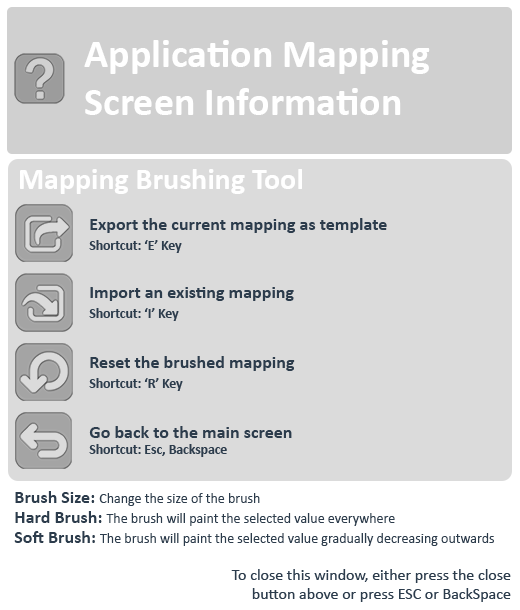
<style>
.page{position:relative;width:520px;height:610px;background:#dbdbdb}
.page>*{position:absolute;margin:0}
.t1{font:40px "Calibri-Bold";color:#ffffff}
.t2{font:30px "Calibri-Bold";color:#ffffff}
.t3{font:18px/20.4px "Calibri-Bold";color:#2c3c4c}
.t4{font:13.6px/20.4px "Calibri-Bold";color:#2c3c4c}
.t5{font:18px "Calibri-Bold";color:#2c3c4c}
.t6{font:13.6px "Calibri-Bold";color:#2c3c4c}
.t7{font:14px "Calibri";color:#2c3c4c}
.t8{font:16px "Calibri";color:#2c3c4c}
</style>
<div class="page">
<p class="t1" style="left:84px;top:40px;width:346px;height:75px">Application Mapping <br>Screen Information</p>
<p class="t2" style="left:20px;top:169px;width:282px;height:25px">Mapping Brushing Tool</p>
<p class="t3" style="left:89px;top:218px;width:298px;height:35px">Export the current mapping as template<br><span class="t4">Shortcut: ‘E’ Key</span></p>
<p class="t3" style="left:89px;top:287px;width:205px;height:34px">Import an existing mapping<br><span class="t4">Shortcut: ‘I’ Key</span></p>
<p class="t3" style="left:89px;top:356px;width:206px;height:35px">Reset the brushed mapping<br><span class="t4">Shortcut: ‘R’ Key</span></p>
<p class="t5" style="left:89px;top:426px;width:203px;height:31px">Go back to the main screen<br><span class="t6">Shortcut: Esc, Backspace</span></p>
<p class="t7" style="left:15px;top:491px;width:245px;height:15px"><span class="t5">Brush Size: </span>Change the size of the brush</p>
<p class="t7" style="left:15px;top:511px;width:380px;height:15px"><span class="t5">Hard Brush: </span>The brush will paint the selected value everywhere</p>
<p class="t7" style="left:14px;top:531px;width:480px;height:15px"><span class="t5">Soft Brush: </span>The brush will paint the selected value gradually decreasing outwards</p>
<p class="t8" style="left:231px;top:569px;width:280px;height:33px;text-align:right">To close this window, either press the close<br>button above or press ESC or BackSpace</p>
</div>
